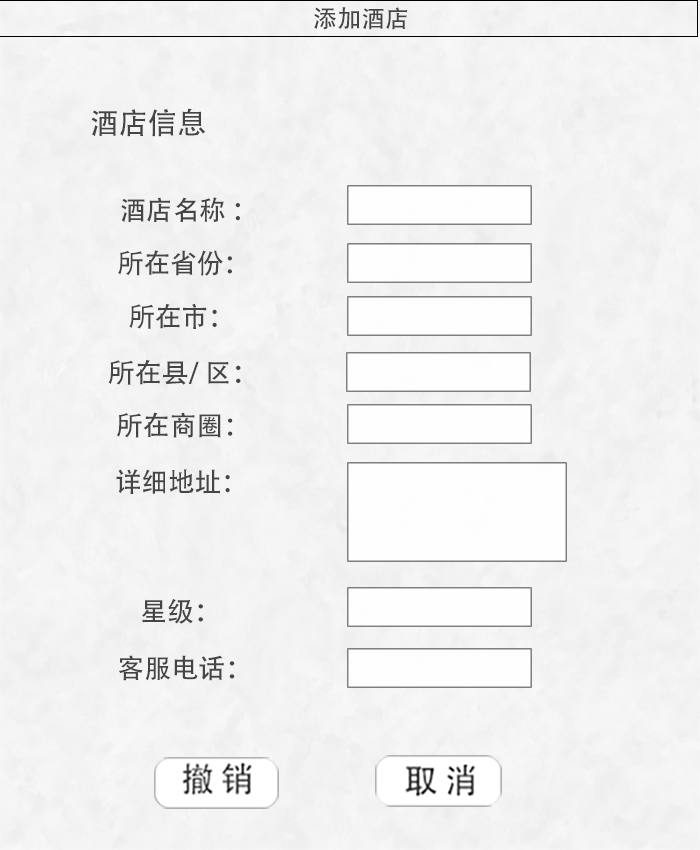
<style>
.page{position:relative;width:700px;height:850px}
.page>*{position:absolute;margin:0}
.t1{font:24px "AdobeHeitiStd-Regular";letter-spacing:-0.005em;color:#474444;text-transform:uppercase}
.t2{font:29.7px "AdobeHeitiStd-Regular";letter-spacing:-0.005em;color:#474444;text-transform:uppercase}
.t3{font:27px "AdobeHeitiStd-Regular";letter-spacing:-0.005em;color:#474444;text-transform:uppercase}
</style>
<div class="page">
<p class="t1" style="left:314px;top:7px;width:93px;height:23px">添加酒店</p>
<p class="t2" style="left:91px;top:108px;width:114px;height:29px">酒店信息</p>
<p class="t3" style="left:121px;top:197px;width:119px;height:25px">酒店名称 ：</p>
<p class="t3" style="left:118px;top:250px;width:114px;height:26px">所在省份：</p>
<p class="t3" style="left:129px;top:303px;width:88px;height:26px">所在市：</p>
<p class="t3" style="left:108px;top:359px;width:133px;height:26px">所在县/ 区：</p>
<p class="t3" style="left:116px;top:412px;width:117px;height:26px">所在商圈：</p>
<p class="t3" style="left:116px;top:469px;width:114px;height:25px">详细地址：</p>
<p class="t3" style="left:142px;top:598px;width:61px;height:26px">星级：</p>
<p class="t3" style="left:118px;top:655px;width:117px;height:26px">客服电话：</p>
</div>
